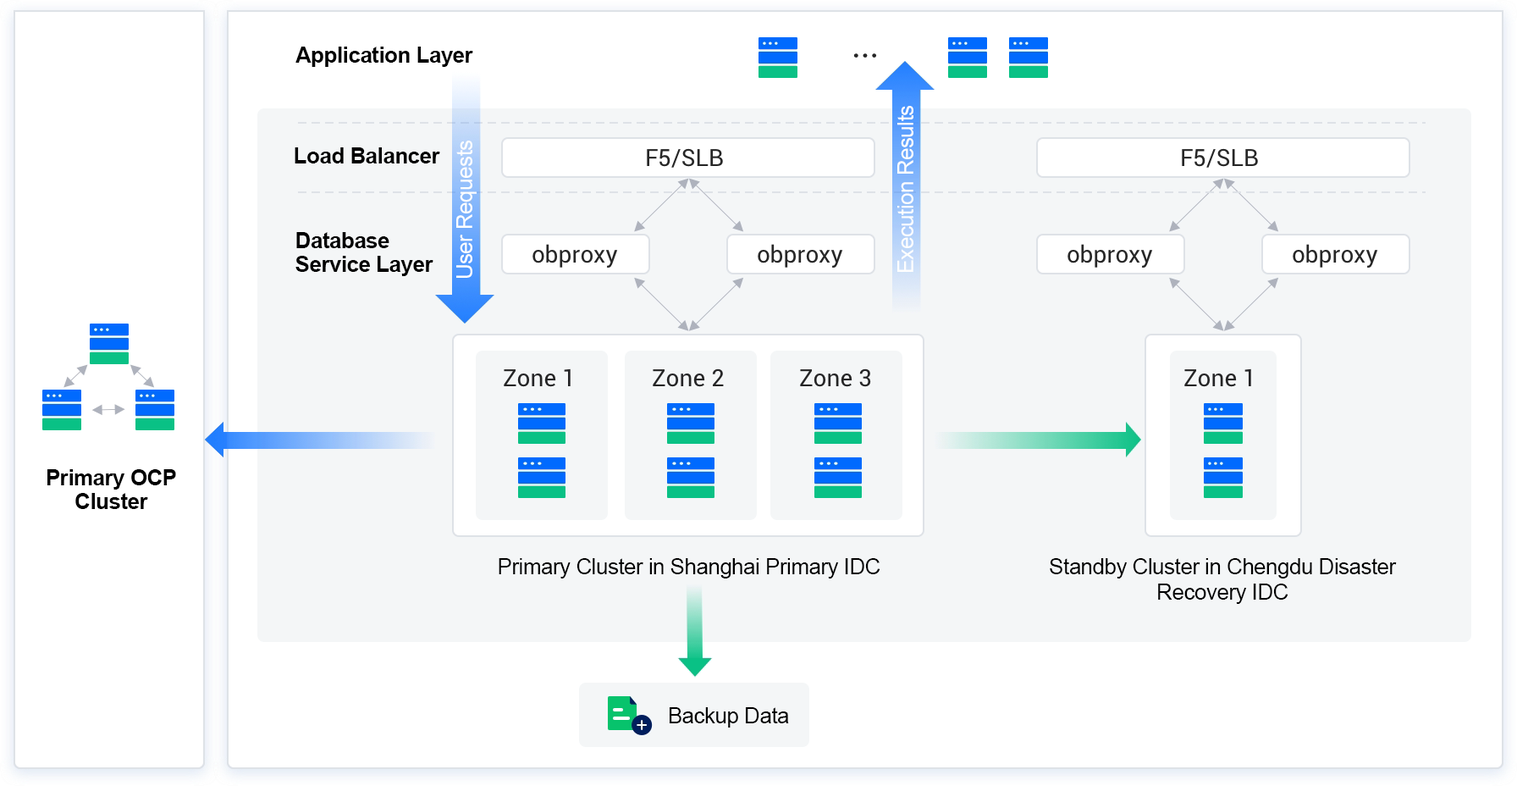
<style>
.page{position:relative;width:1517px;height:786px;background:#ffffff}
.page>*{position:absolute;margin:0}
.t1{font:22px "Arial-BoldMT";letter-spacing:-0.02em;color:#000000}
.t2{font:22px "ArialMT";letter-spacing:-0.02em;color:#fefefe}
.t3{font:22px/23.7px "Arial-BoldMT";letter-spacing:-0.02em;color:#000000}
.t4{font:22px "ArialMT";letter-spacing:-0.02em;color:#000000}
.t5{font:22px/25.4px "ArialMT";letter-spacing:-0.02em;color:#000000}
</style>
<div class="page">
<p class="t1" style="left:296px;top:47px;width:177px;height:20px">Application Layer</p>
<p class="t2" style="left:898px;top:106px;width:16px;height:166px;rotate:-90deg">Execution Results</p>
<p class="t1" style="left:295px;top:147px;width:145px;height:16px">Load Balancer</p>
<p class="t2" style="left:456px;top:141px;width:21px;height:137px;rotate:-90deg">User Requests</p>
<p class="t3" style="left:296px;top:232px;width:138px;height:44px">Database Service Layer</p>
<p class="t3" style="left:47px;top:469px;width:129px;height:40px;text-align:center">Primary OCP Cluster</p>
<p class="t4" style="left:499px;top:558px;width:382px;height:20px">Primary Cluster in Shanghai Primary IDC</p>
<p class="t5" style="left:1050px;top:558px;width:347px;height:46px;text-align:center">Standby Cluster in Chengdu Disaster Recovery IDC</p>
<p class="t4" style="left:670px;top:707px;width:119px;height:20px">Backup Data</p>
</div>
